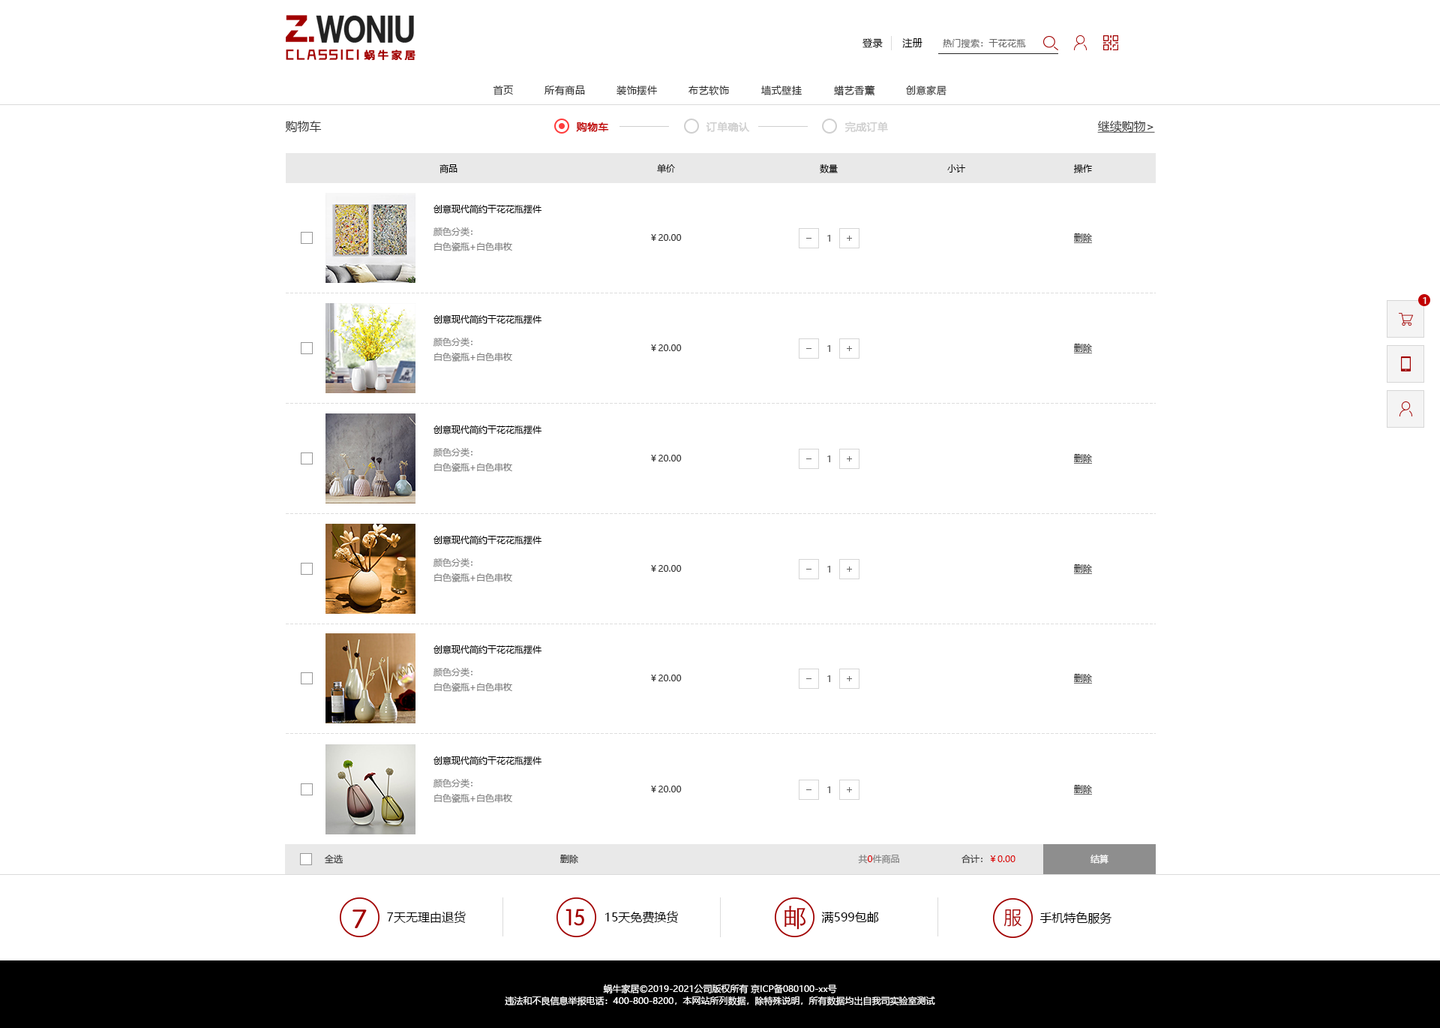
<style>
.page{position:relative;width:1440px;height:1028px;background:#ffffff}
.page>*{position:absolute;margin:0}
.t1{font:9.8px "MicrosoftYaHei";letter-spacing:0.05em;color:#000000}
.t2{font:9px "MicrosoftYaHei";letter-spacing:0.025em;color:#686868}
.t3{font:9.8px "MicrosoftYaHei";letter-spacing:0.05em;color:#333333}
.t4{font:12px "MicrosoftYaHei";color:#333333}
.t5{font:10.5px "MicrosoftYaHei";color:#c10000;font-weight:bold}
.t6{font:10.5px "MicrosoftYaHei";color:#cfcfcf;font-weight:bold}
.t7{font:12px "MicrosoftYaHei";color:#333333;text-decoration:underline}
.t8{font:9px "MicrosoftYaHei";color:#000000}
.t9{font:9px "MicrosoftYaHei";color:#808080}
.t10{font:9px "MicrosoftYaHei";color:#333333;text-decoration:underline}
.t11{font:9px "MicrosoftYaHei";color:#333333}
.t12{font:9px "MicrosoftYaHei"}
.t13{font:9px "MicrosoftYaHei";letter-spacing:0.025em;color:#ffffff}
.t14{font:9px "MicrosoftYaHei";color:#db0000}
.t15{font:9px "MicrosoftYaHei";color:#ffffff}
.t16{font:12px "MicrosoftYaHei";color:#000000}
.t17{font:9px/12px "MicrosoftYaHei";color:#ffffff}
</style>
<div class="page">
<p class="t1" style="left:862px;top:38px;width:21px;height:10px">登录</p>
<p class="t1" style="left:902px;top:38px;width:20px;height:10px">注册</p>
<p class="t2" style="left:943px;top:38px;width:83px;height:10px">热门搜索：干花花瓶</p>
<p class="t3" style="left:493px;top:86px;width:20px;height:9px">首页</p>
<p class="t3" style="left:544px;top:86px;width:41px;height:9px">所有商品</p>
<p class="t3" style="left:616px;top:86px;width:41px;height:9px">装饰摆件</p>
<p class="t3" style="left:688px;top:86px;width:41px;height:9px">布艺软饰</p>
<p class="t3" style="left:760px;top:86px;width:42px;height:9px">墙式壁挂</p>
<p class="t3" style="left:834px;top:85px;width:41px;height:11px">蜡艺香薰</p>
<p class="t3" style="left:906px;top:86px;width:40px;height:9px">创意家居</p>
<p class="t4" style="left:285px;top:121px;width:37px;height:11px">购物车</p>
<p class="t5" style="left:576px;top:122px;width:33px;height:10px">购物车</p>
<p class="t6" style="left:706px;top:122px;width:44px;height:10px">订单确认</p>
<p class="t6" style="left:844px;top:122px;width:44px;height:10px">完成订单</p>
<p class="t7" style="left:1097px;top:120px;width:58px;height:13px">继续购物&gt;</p>
<p class="t8" style="left:440px;top:164px;width:18px;height:9px">商品</p>
<p class="t8" style="left:657px;top:164px;width:18px;height:9px">单价</p>
<p class="t8" style="left:820px;top:164px;width:18px;height:9px">数量</p>
<p class="t8" style="left:947px;top:164px;width:18px;height:8px">小计</p>
<p class="t8" style="left:1073px;top:164px;width:19px;height:9px">操作</p>
<p class="t8" style="left:434px;top:204px;width:108px;height:10px">创意现代简约干花花瓶摆件</p>
<p class="t9" style="left:433px;top:226px;width:39px;height:10px">颜色分类：</p>
<p class="t10" style="left:1074px;top:233px;width:18px;height:10px">删除</p>
<p class="t9" style="left:434px;top:242px;width:78px;height:9px">白色瓷瓶+白色串枚</p>
<p class="t11" style="left:651px;top:234px;width:31px;height:7px">￥20.00</p>
<p class="t12" style="left:827px;top:235px;width:3px;height:7px">1</p>
<p class="t13" style="left:1423px;top:297px;width:3px;height:7px">1</p>
<p class="t8" style="left:434px;top:314px;width:108px;height:10px">创意现代简约干花花瓶摆件</p>
<p class="t9" style="left:433px;top:337px;width:39px;height:9px">颜色分类：</p>
<p class="t9" style="left:434px;top:352px;width:78px;height:10px">白色瓷瓶+白色串枚</p>
<p class="t11" style="left:651px;top:344px;width:31px;height:7px">￥20.00</p>
<p class="t12" style="left:827px;top:345px;width:3px;height:7px">1</p>
<p class="t10" style="left:1074px;top:344px;width:18px;height:9px">删除</p>
<p class="t8" style="left:434px;top:424px;width:108px;height:10px">创意现代简约干花花瓶摆件</p>
<p class="t9" style="left:433px;top:447px;width:39px;height:10px">颜色分类：</p>
<p class="t9" style="left:434px;top:462px;width:78px;height:10px">白色瓷瓶+白色串枚</p>
<p class="t11" style="left:651px;top:454px;width:31px;height:7px">￥20.00</p>
<p class="t12" style="left:827px;top:455px;width:3px;height:7px">1</p>
<p class="t10" style="left:1074px;top:454px;width:18px;height:10px">删除</p>
<p class="t8" style="left:434px;top:535px;width:108px;height:9px">创意现代简约干花花瓶摆件</p>
<p class="t9" style="left:433px;top:557px;width:39px;height:10px">颜色分类：</p>
<p class="t11" style="left:651px;top:565px;width:31px;height:7px">￥20.00</p>
<p class="t12" style="left:827px;top:566px;width:3px;height:6px">1</p>
<p class="t10" style="left:1074px;top:564px;width:18px;height:10px">删除</p>
<p class="t9" style="left:434px;top:572px;width:78px;height:10px">白色瓷瓶+白色串枚</p>
<p class="t8" style="left:434px;top:644px;width:108px;height:10px">创意现代简约干花花瓶摆件</p>
<p class="t9" style="left:433px;top:667px;width:39px;height:9px">颜色分类：</p>
<p class="t11" style="left:651px;top:674px;width:31px;height:7px">￥20.00</p>
<p class="t12" style="left:827px;top:675px;width:3px;height:7px">1</p>
<p class="t10" style="left:1074px;top:674px;width:18px;height:9px">删除</p>
<p class="t9" style="left:434px;top:682px;width:78px;height:10px">白色瓷瓶+白色串枚</p>
<p class="t8" style="left:434px;top:755px;width:108px;height:10px">创意现代简约干花花瓶摆件</p>
<p class="t9" style="left:433px;top:778px;width:39px;height:10px">颜色分类：</p>
<p class="t11" style="left:651px;top:785px;width:31px;height:7px">￥20.00</p>
<p class="t10" style="left:1074px;top:784px;width:18px;height:10px">删除</p>
<p class="t9" style="left:434px;top:793px;width:78px;height:9px">白色瓷瓶+白色串枚</p>
<p class="t12" style="left:827px;top:786px;width:3px;height:7px">1</p>
<p class="t11" style="left:325px;top:854px;width:18px;height:9px">全选</p>
<p class="t11" style="left:560px;top:854px;width:18px;height:9px">删除</p>
<p class="t9" style="left:858px;top:854px;width:41px;height:9px">共<span class="t14">0</span>件商品</p>
<p class="t14" style="left:962px;top:854px;width:54px;height:9px"><span class="t11">合计：</span>￥0.00</p>
<p class="t15" style="left:1090px;top:854px;width:18px;height:9px">结算</p>
<p class="t16" style="left:387px;top:910px;width:79px;height:12px">7天无理由退货</p>
<p class="t16" style="left:605px;top:910px;width:73px;height:13px">15天免费换货</p>
<p class="t16" style="left:821px;top:911px;width:58px;height:11px">满599包邮</p>
<p class="t16" style="left:1040px;top:911px;width:72px;height:13px">手机特色服务</p>
<p class="t17" style="left:505px;top:983px;width:430px;height:22px;text-align:center">蜗牛家居©2019-2021公司版权所有 京ICP备080100-xx号<br>违法和不良信息举报电话：400-800-8200，本网站所列数据，除特殊说明，所有数据均出自我司实验室测试</p>
</div>
